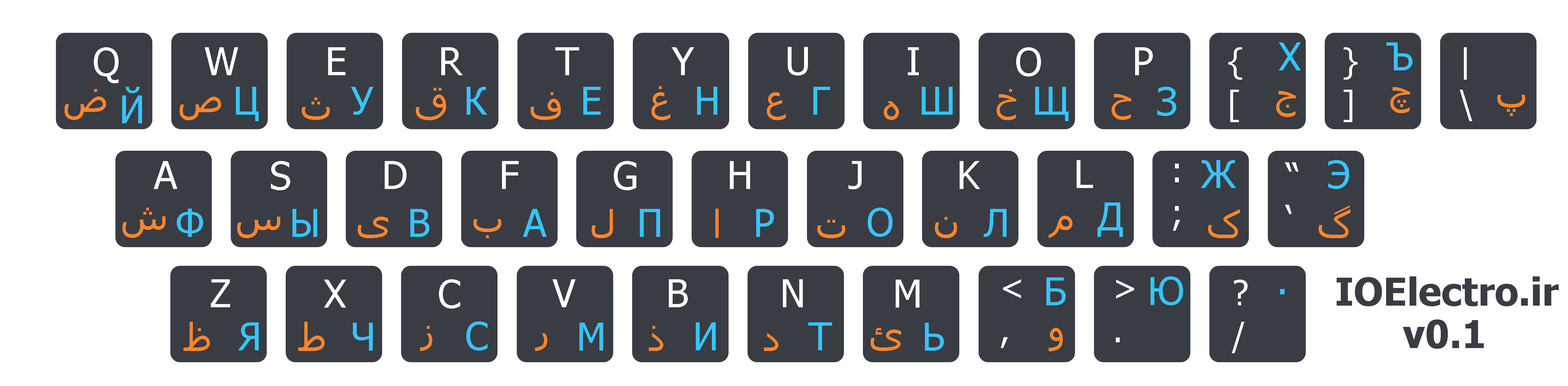
<style>
.page{position:relative;width:1568px;height:386px;background:#ffffff}
.page>*{position:absolute;margin:0}
.t1{font:38.6px "Tahoma";color:#ffffff}
.t2{font:34.3px/42.4px "Tahoma";color:#ffffff}
.t3{font:38.6px "Tahoma";color:#37c4ff}
.t4{font:38.6px "Tahoma";color:#ff862d}
.t5{font:38.6px/42.4px "Tahoma-Bold";color:#393c43}
</style>
<div class="page">
<p class="t1" style="left:94px;top:47px;width:25px;height:36px">Q</p>
<p class="t1" style="left:205px;top:47px;width:33px;height:28px">W</p>
<p class="t1" style="left:328px;top:47px;width:17px;height:28px">E</p>
<p class="t1" style="left:441px;top:47px;width:22px;height:28px">R</p>
<p class="t1" style="left:555px;top:47px;width:24px;height:28px">T</p>
<p class="t1" style="left:672px;top:47px;width:22px;height:28px">Y</p>
<p class="t1" style="left:788px;top:47px;width:20px;height:29px">U</p>
<p class="t1" style="left:908px;top:47px;width:11px;height:28px">I</p>
<p class="t1" style="left:1016px;top:47px;width:25px;height:29px">O</p>
<p class="t1" style="left:1135px;top:47px;width:18px;height:28px">P</p>
<p class="t2" style="left:1228px;top:47px;width:14px;height:75px">{<br>[</p>
<p class="t3" style="left:1279px;top:42px;width:22px;height:28px">Х</p>
<p class="t2" style="left:1344px;top:47px;width:13px;height:75px">}<br>]</p>
<p class="t3" style="left:1386px;top:42px;width:26px;height:28px">Ъ</p>
<p class="t2" style="left:1460px;top:47px;width:12px;height:74px">|<br>\</p>
<p class="t4" style="left:65px;top:89px;width:41px;height:31px">ض</p>
<p class="t3" style="left:122px;top:87px;width:20px;height:36px">Й</p>
<p class="t3" style="left:236px;top:87px;width:23px;height:34px">Ц</p>
<p class="t3" style="left:351px;top:87px;width:22px;height:28px">У</p>
<p class="t4" style="left:416px;top:88px;width:30px;height:32px">ق</p>
<p class="t3" style="left:467px;top:87px;width:20px;height:28px">К</p>
<p class="t3" style="left:583px;top:87px;width:18px;height:28px">Е</p>
<p class="t4" style="left:651px;top:86px;width:19px;height:34px">غ</p>
<p class="t3" style="left:697px;top:87px;width:20px;height:28px">Н</p>
<p class="t3" style="left:813px;top:87px;width:17px;height:28px">Г</p>
<p class="t3" style="left:922px;top:87px;width:31px;height:28px">Ш</p>
<p class="t4" style="left:997px;top:89px;width:19px;height:31px">خ</p>
<p class="t3" style="left:1035px;top:87px;width:34px;height:34px">Щ</p>
<p class="t3" style="left:1157px;top:87px;width:19px;height:29px">З</p>
<p class="t4" style="left:1390px;top:87px;width:20px;height:26px">چ</p>
<p class="t4" style="left:180px;top:97px;width:41px;height:23px">ص</p>
<p class="t4" style="left:302px;top:97px;width:28px;height:23px">ث</p>
<p class="t4" style="left:531px;top:92px;width:30px;height:28px">ف</p>
<p class="t4" style="left:767px;top:92px;width:19px;height:28px">ع</p>
<p class="t4" style="left:884px;top:101px;width:15px;height:19px">ه</p>
<p class="t4" style="left:1112px;top:94px;width:19px;height:26px">ح</p>
<p class="t4" style="left:1276px;top:91px;width:20px;height:26px">ج</p>
<p class="t4" style="left:1497px;top:95px;width:28px;height:21px">پ</p>
<p class="t1" style="left:154px;top:161px;width:23px;height:28px">A</p>
<p class="t1" style="left:271px;top:161px;width:19px;height:29px">S</p>
<p class="t1" style="left:385px;top:161px;width:22px;height:28px">D</p>
<p class="t1" style="left:502px;top:161px;width:17px;height:28px">F</p>
<p class="t1" style="left:614px;top:161px;width:22px;height:29px">G</p>
<p class="t1" style="left:730px;top:161px;width:20px;height:28px">H</p>
<p class="t1" style="left:848px;top:161px;width:14px;height:28px">J</p>
<p class="t1" style="left:960px;top:161px;width:20px;height:28px">K</p>
<p class="t1" style="left:1077px;top:160px;width:16px;height:28px">L</p>
<p class="t3" style="left:1201px;top:160px;width:35px;height:28px">Ж</p>
<p class="t3" style="left:1328px;top:160px;width:21px;height:29px">Э</p>
<p class="t2" style="left:1173px;top:164px;width:7px;height:67px">:<br>;</p>
<p class="t2" style="left:1285px;top:162px;width:13px;height:52px">“<br>‘</p>
<p class="t4" style="left:122px;top:208px;width:44px;height:30px">ش</p>
<p class="t3" style="left:177px;top:209px;width:26px;height:28px">Ф</p>
<p class="t3" style="left:292px;top:209px;width:25px;height:28px">Ы</p>
<p class="t3" style="left:410px;top:209px;width:19px;height:28px">В</p>
<p class="t3" style="left:523px;top:209px;width:24px;height:28px">А</p>
<p class="t4" style="left:592px;top:209px;width:21px;height:29px">ل</p>
<p class="t3" style="left:640px;top:209px;width:20px;height:28px">П</p>
<p class="t3" style="left:756px;top:209px;width:18px;height:28px">Р</p>
<p class="t3" style="left:868px;top:208px;width:24px;height:29px">О</p>
<p class="t3" style="left:984px;top:209px;width:23px;height:28px">Л</p>
<p class="t3" style="left:1098px;top:202px;width:25px;height:35px">Д</p>
<p class="t4" style="left:1208px;top:209px;width:32px;height:29px">ک</p>
<p class="t4" style="left:1319px;top:205px;width:31px;height:33px">گ</p>
<p class="t4" style="left:237px;top:217px;width:43px;height:21px">س</p>
<p class="t4" style="left:358px;top:217px;width:30px;height:21px">ی</p>
<p class="t4" style="left:473px;top:219px;width:28px;height:19px">ب</p>
<p class="t4" style="left:817px;top:220px;width:28px;height:18px">ت</p>
<p class="t4" style="left:935px;top:217px;width:22px;height:21px">ن</p>
<p class="t4" style="left:1049px;top:216px;width:23px;height:22px">م</p>
<p class="t1" style="left:211px;top:279px;width:19px;height:28px">Z</p>
<p class="t1" style="left:324px;top:280px;width:22px;height:28px">X</p>
<p class="t1" style="left:439px;top:279px;width:21px;height:30px">C</p>
<p class="t1" style="left:552px;top:279px;width:24px;height:28px">V</p>
<p class="t1" style="left:669px;top:279px;width:19px;height:28px">B</p>
<p class="t1" style="left:783px;top:279px;width:20px;height:28px">N</p>
<p class="t1" style="left:896px;top:280px;width:23px;height:28px">M</p>
<p class="t2" style="left:1001px;top:279px;width:20px;height:69px">&lt;<br>,</p>
<p class="t3" style="left:1046px;top:277px;width:20px;height:28px">Б</p>
<p class="t2" style="left:1116px;top:280px;width:18px;height:62px">&gt;<br>.</p>
<p class="t3" style="left:1151px;top:276px;width:32px;height:29px">Ю</p>
<p class="t2" style="left:1232px;top:280px;width:16px;height:73px">?<br>/</p>
<p class="t5" style="left:1337px;top:276px;width:222px;height:73px">IOElectro.ir<br>      v0.1</p>
<p class="t4" style="left:184px;top:322px;width:26px;height:29px">ظ</p>
<p class="t3" style="left:238px;top:322px;width:21px;height:28px">Я</p>
<p class="t4" style="left:298px;top:322px;width:27px;height:29px">ط</p>
<p class="t3" style="left:353px;top:323px;width:20px;height:28px">Ч</p>
<p class="t4" style="left:420px;top:326px;width:12px;height:25px">ز</p>
<p class="t3" style="left:466px;top:321px;width:22px;height:30px">С</p>
<p class="t3" style="left:579px;top:323px;width:24px;height:28px">М</p>
<p class="t4" style="left:649px;top:326px;width:14px;height:25px">ذ</p>
<p class="t3" style="left:696px;top:322px;width:20px;height:28px">И</p>
<p class="t3" style="left:808px;top:322px;width:24px;height:28px">Т</p>
<p class="t4" style="left:871px;top:328px;width:30px;height:23px">ئ</p>
<p class="t3" style="left:925px;top:323px;width:19px;height:28px">Ь</p>
<p class="t4" style="left:1049px;top:328px;width:14px;height:23px">و</p>
<p class="t4" style="left:535px;top:333px;width:12px;height:18px">ر</p>
<p class="t4" style="left:764px;top:333px;width:14px;height:18px">د</p>
</div>
